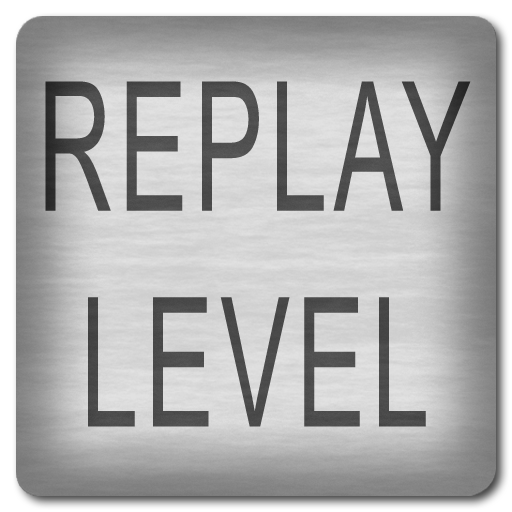
<style>
.page{position:relative;width:512px;height:512px}
.page>*{position:absolute;margin:0}
.t1{font:180px "ArialMT";letter-spacing:0.06em;color:#4c4c4c;scale:0.58 1}
</style>
<div class="page">
<p class="t1" style="left:45px;top:81px;width:426px;height:346px;text-align:center">REPLAY<br>LEVEL</p>
</div>
